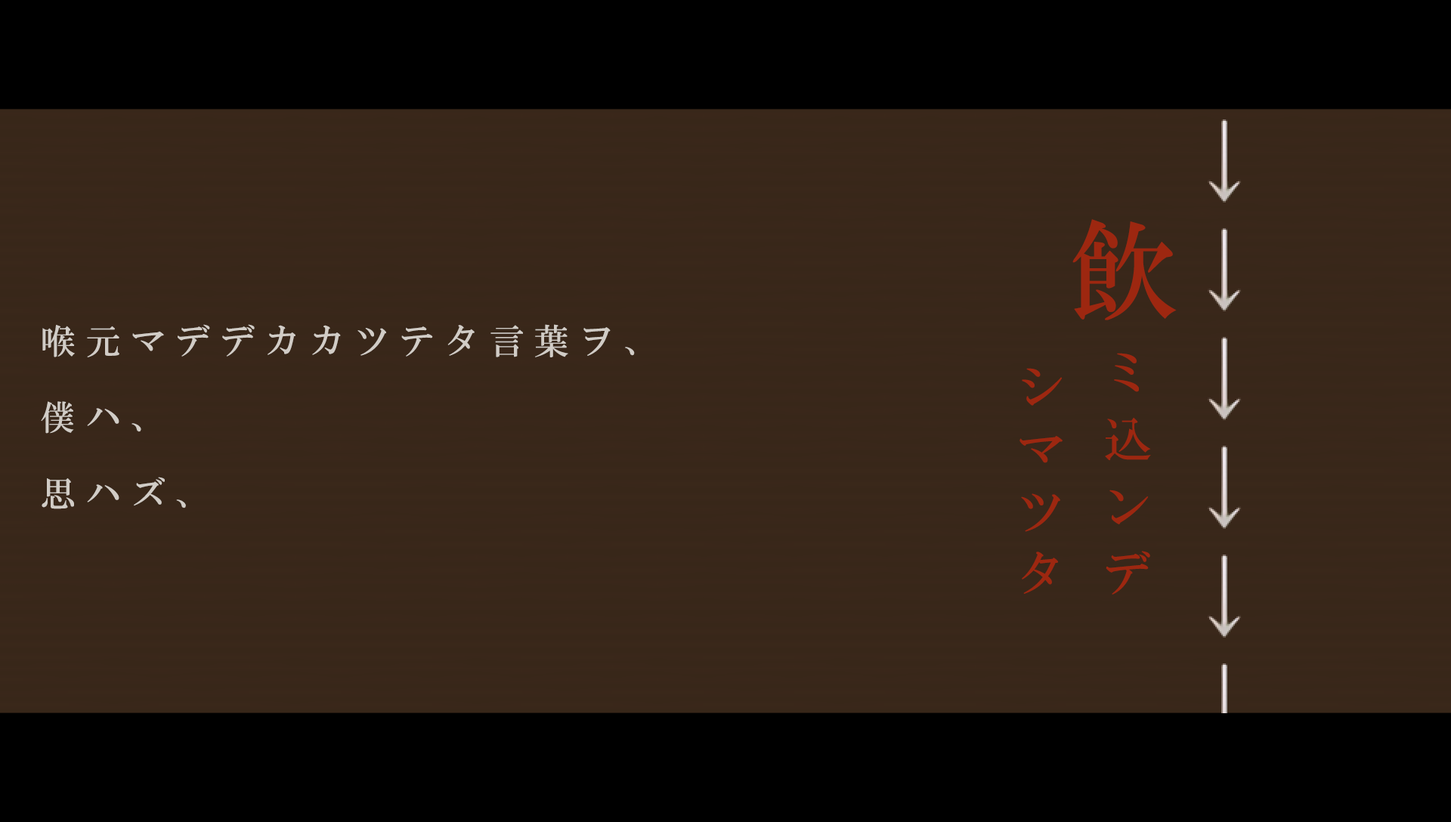
<style>
.page{position:relative;width:1451px;height:822px;background:#382719}
.page>*{position:absolute;margin:0}
.t1{font:108px "HGMinchoB";letter-spacing:0.29em;color:#9d2710}
.t2{font:34.8px/76.3px "HGMinchoB";letter-spacing:0.29em;color:#d1ccc6}
.t3{font:47.6px/86.1px "HGMinchoB";letter-spacing:0.41em;color:#9d2710}
.t4{font:47.6px/86.1px "HGMinchoB";letter-spacing:0.31em;color:#9d2710}
</style>
<div class="page">
<p class="t1" style="left:1072px;top:219px;width:104px;height:101px">飲</p>
<p class="t2" style="left:41px;top:324px;width:594px;height:185px">喉元マデデカカツテタ言葉ヲ、<br>僕ハ、<br>思ハズ、</p>
<p class="t3" style="left:1019px;top:353px;width:132px;height:242px">ミ込ンデ<br> <span class="t4">シマツタ</span></p>
</div>
